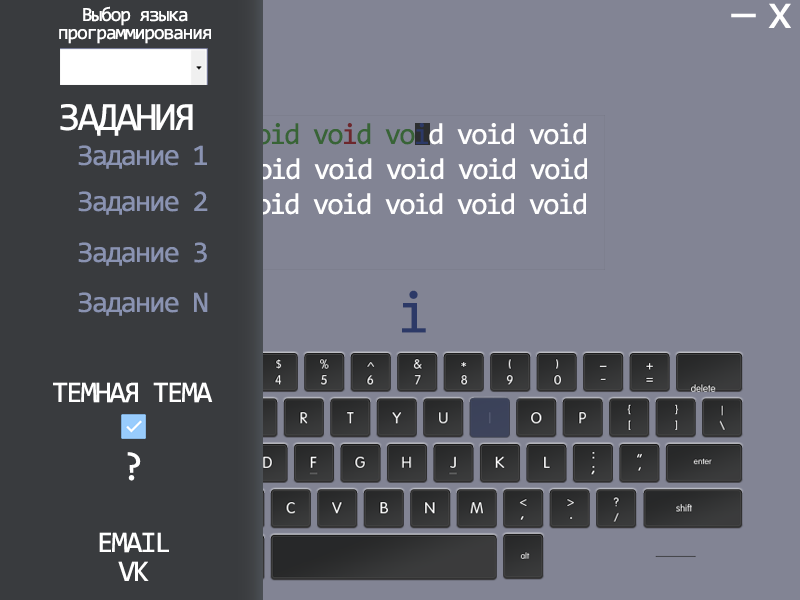
<style>
.page{position:relative;width:800px;height:600px;background:#828494}
.page>*{position:absolute;margin:0}
.t1{font:20px "Consolas";letter-spacing:-0.07em;color:#ffffff}
.t2{font:50px "MyriadPro-Regular";letter-spacing:-0.07em;color:#ffffff}
.t3{font:40px "Consolas";letter-spacing:-0.07em;color:#ffffff}
.t4{font:30px "Consolas";letter-spacing:-0.07em;color:#8a93b2}
.t5{font:30px "Consolas";letter-spacing:-0.07em;color:#ffffff}
.t6{font:60px "Consolas";letter-spacing:-0.07em;color:#2c3967}
</style>
<div class="page">
<p class="t1" style="left:83px;top:6px;width:105px;height:20px">Выбор языка</p>
<p class="t2" style="left:768px;top:3px;width:23px;height:25px">х</p>
<p class="t2" style="left:731px;top:13px;width:25px;height:5px">--</p>
<p class="t1" style="left:59px;top:29px;width:152px;height:15px">программирования</p>
<p class="t3" style="left:60px;top:104px;width:133px;height:32px">ЗАДАНИЯ</p>
<p class="t4" style="left:78px;top:145px;width:129px;height:24px">Задание 1</p>
<p class="t5" style="left:242px;top:158px;width:345px;height:22px">void void void void void</p>
<p class="t4" style="left:78px;top:191px;width:130px;height:24px">Задание 2</p>
<p class="t5" style="left:241px;top:193px;width:345px;height:22px">void void void void void</p>
<p class="t4" style="left:78px;top:242px;width:129px;height:24px">Задание 3</p>
<p class="t4" style="left:78px;top:292px;width:130px;height:24px">Задание N</p>
<p class="t6" style="left:402px;top:290px;width:24px;height:43px">i</p>
<p class="t5" style="left:53px;top:382px;width:160px;height:21px">ТЕМНАЯ ТЕМА</p>
<p class="t3" style="left:127px;top:452px;width:14px;height:29px">?</p>
<p class="t5" style="left:99px;top:532px;width:70px;height:21px">EMAIL</p>
<p class="t5" style="left:118px;top:561px;width:31px;height:20px">VK</p>
</div>
